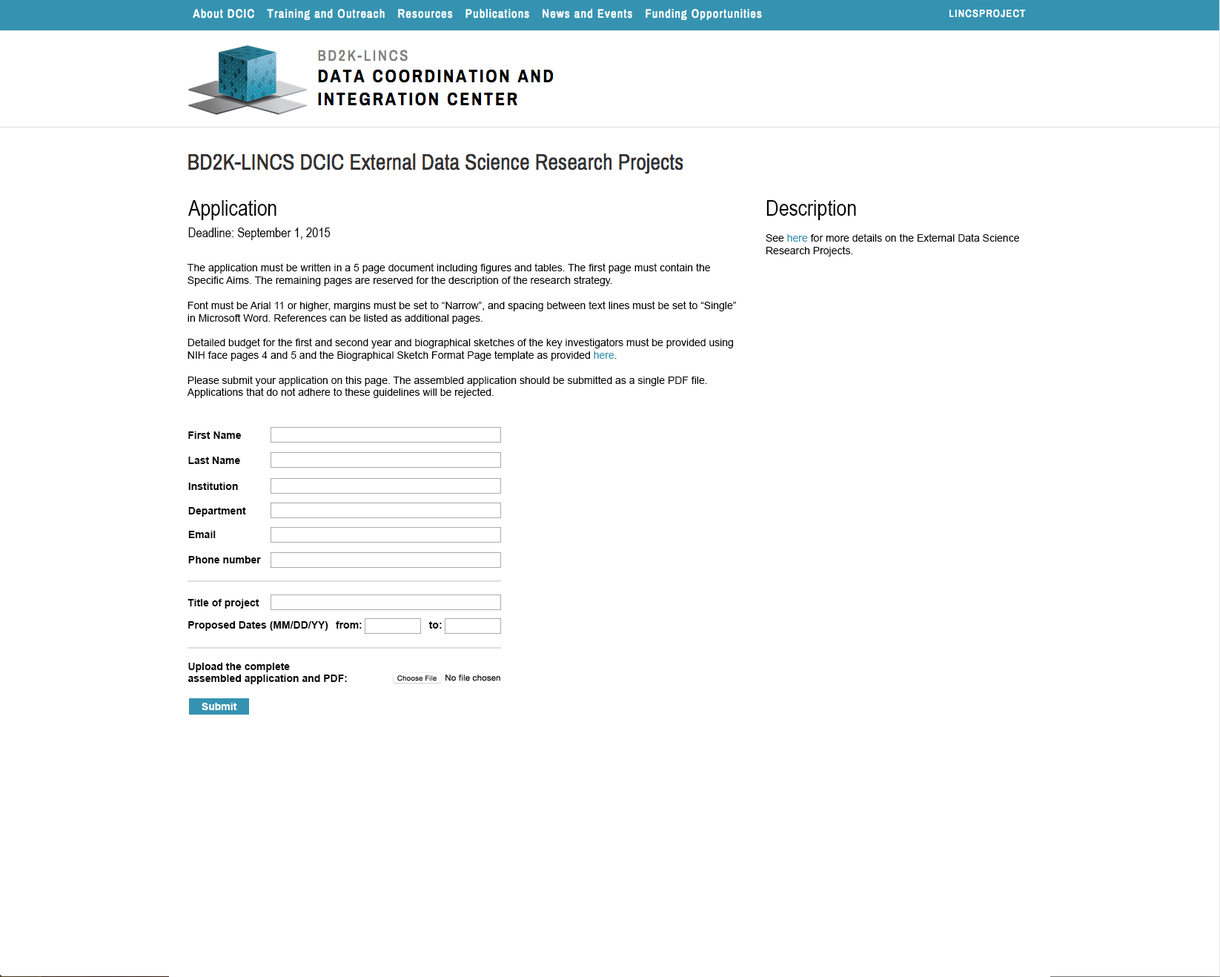
<style>
.page{position:relative;width:1220px;height:977px;background:#ffffff}
.page>*{position:absolute;margin:0}
.t1{font:22.2px "ArialNarrow";color:#000000}
.t2{font:13.3px "ArialNarrow";color:#000000}
.t3{font:10.4px "ArialMT";color:#000000}
.t4{font:10.4px "ArialMT";color:#3593b1}
.t5{font:10.4px "Arial-BoldMT";color:#000000}
</style>
<div class="page">
<p class="t1" style="left:188px;top:200px;width:89px;height:20px">Application</p>
<p class="t1" style="left:767px;top:200px;width:89px;height:20px">Description</p>
<p class="t2" style="left:188px;top:228px;width:143px;height:12px">Deadline: September 1, 2015</p>
<p class="t3" style="left:766px;top:234px;width:253px;height:23px">See <span class="t4">here</span> for more details on the External Data Science Research Projects.</p>
<p class="t3" style="left:187px;top:263px;width:549px;height:135px">The application must be written in a 5 page document including figures and tables. The first page must contain the Specific Aims. The remaining pages are reserved for the description of the research strategy.<br><br>Font must be Arial 11 or higher, margins must be set to “Narrow”, and spacing between text lines must be set to “Single” in Microsoft Word. References can be listed as additional pages.<br><br>Detailed budget for the first and second year and biographical sketches of the key investigators must be provided using NIH face pages 4 and 5 and the Biographical Sketch Format Page template as provided <span class="t4">here</span>.<br><br>Please submit your application on this page. The assembled application should be submitted as a single PDF file. Applications that do not adhere to these guidelines will be rejected.</p>
<p class="t5" style="left:188px;top:431px;width:54px;height:8px">First Name</p>
<p class="t5" style="left:188px;top:457px;width:52px;height:7px">Last Name</p>
<p class="t5" style="left:188px;top:483px;width:50px;height:7px">Institution</p>
<p class="t5" style="left:188px;top:507px;width:58px;height:10px">Department</p>
<p class="t5" style="left:188px;top:531px;width:28px;height:7px">Email</p>
<p class="t5" style="left:188px;top:556px;width:73px;height:7px">Phone number</p>
<p class="t5" style="left:188px;top:599px;width:71px;height:10px">Title of project</p>
<p class="t5" style="left:188px;top:621px;width:140px;height:10px">Proposed Dates (MM/DD/YY)</p>
<p class="t5" style="left:336px;top:621px;width:26px;height:8px">from:</p>
<p class="t5" style="left:429px;top:621px;width:13px;height:8px">to:</p>
<p class="t5" style="left:188px;top:663px;width:159px;height:21px">Upload the complete<br>assembled application and PDF:</p>
</div>
